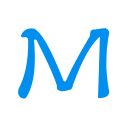
<style>
.page{position:relative;width:128px;height:128px;background:#ffffff}
.page>*{position:absolute;margin:0}
.t1{font:125px "FZSTK--GBK1-0";color:#0090f0}
</style>
<div class="page">
<p class="t1" style="left:18px;top:28px;width:92px;height:71px">M</p>
</div>
